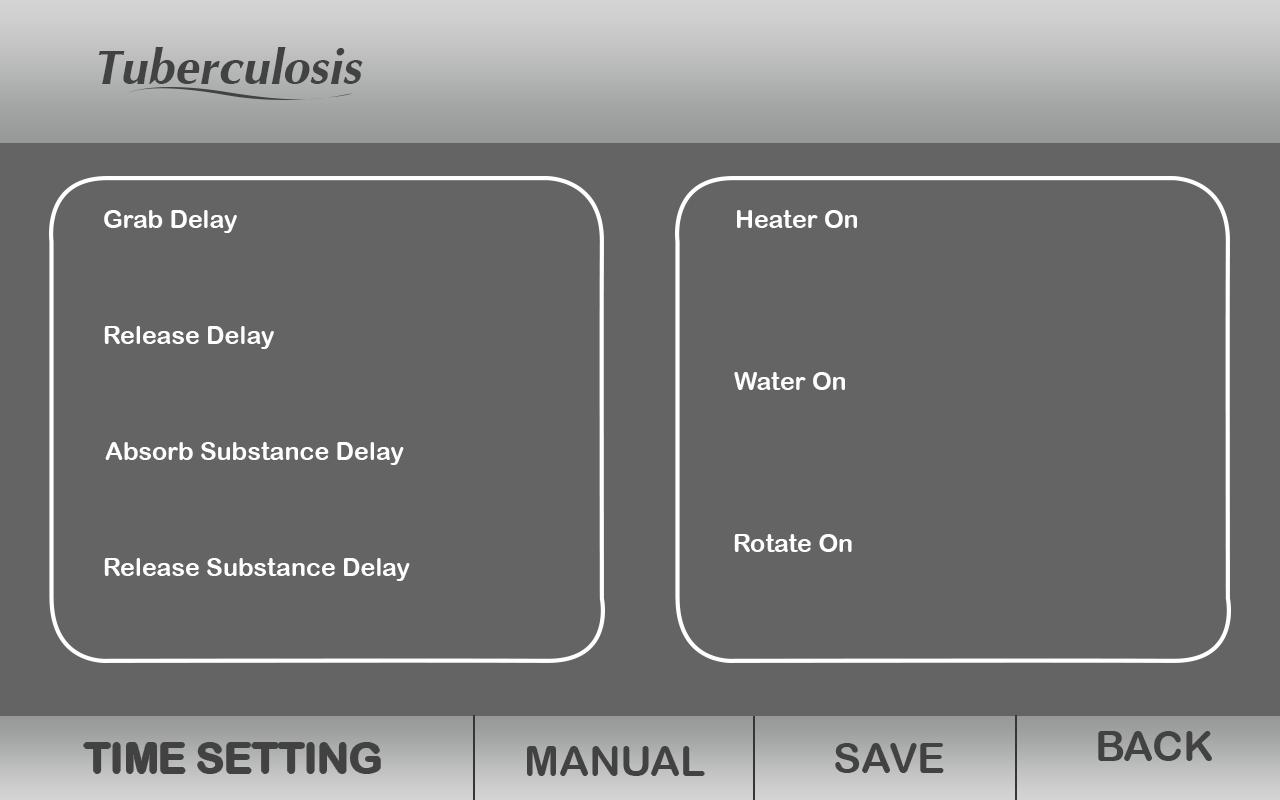
<style>
.page{position:relative;width:1280px;height:800px;background:#656464}
.page>*{position:absolute;margin:0}
.t1{font:75px "IrisUPCBoldItalic";color:#424242}
.t2{font:25px "ArialRoundedMTBold";color:#fefefe}
.t3{font:41.7px "ArialRoundedMTBold";color:#424242}
</style>
<div class="page">
<p class="t1" style="left:98px;top:47px;width:265px;height:37px">Tuberculosis</p>
<p class="t2" style="left:104px;top:210px;width:133px;height:23px">Grab Delay</p>
<p class="t2" style="left:737px;top:210px;width:120px;height:18px">Heater On</p>
<p class="t2" style="left:104px;top:326px;width:170px;height:23px">Release Delay</p>
<p class="t2" style="left:734px;top:372px;width:111px;height:18px">Water On</p>
<p class="t2" style="left:105px;top:442px;width:299px;height:23px">Absorb Substance Delay</p>
<p class="t2" style="left:734px;top:534px;width:118px;height:18px">Rotate On</p>
<p class="t2" style="left:104px;top:558px;width:306px;height:23px">Release Substance Delay</p>
<p class="t3" style="left:1098px;top:731px;width:114px;height:30px">BACK</p>
<p class="t3" style="left:84px;top:743px;width:296px;height:30px">TIME SETTING</p>
<p class="t3" style="left:527px;top:746px;width:178px;height:30px">MANUAL</p>
<p class="t3" style="left:835px;top:743px;width:109px;height:30px">SAVE</p>
</div>
